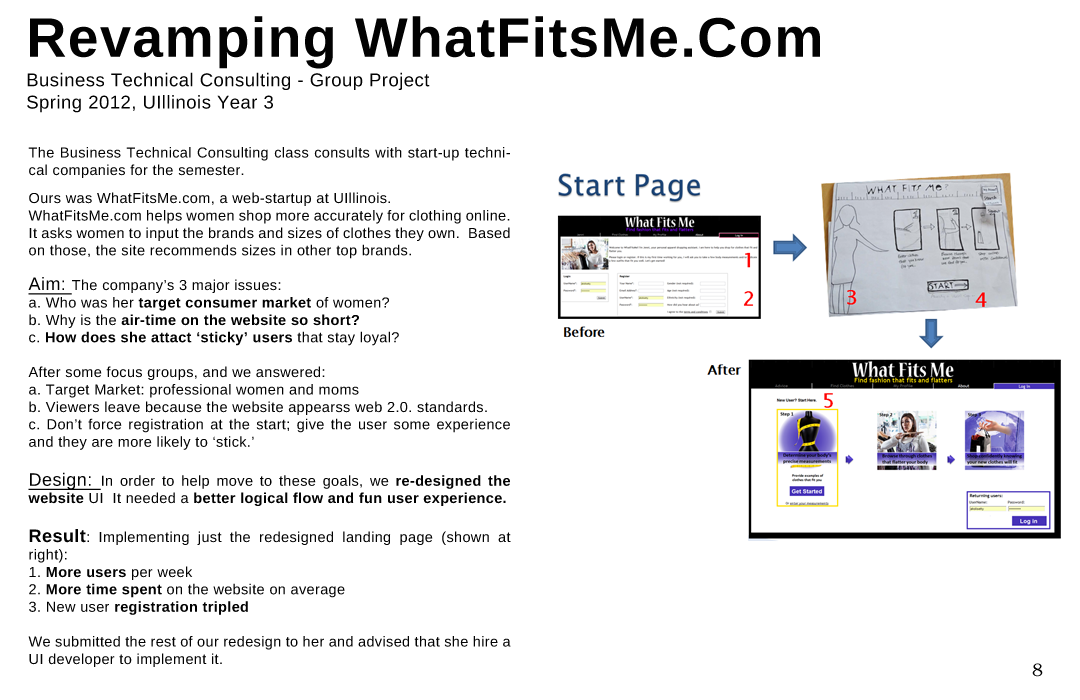
<style>
.page{position:relative;width:1080px;height:700px;background:#ffffff}
.page>*{position:absolute;margin:0}
.t1{font:18.5px "LiberationSans";letter-spacing:0.025em;color:#020202}
.t2{font:55.6px "LiberationSans-Bold";letter-spacing:0.025em;color:#020202}
.t3{font:14.5px "LiberationSans";letter-spacing:0.025em;color:#020202}
.t4{font:18px "LiberationSans";letter-spacing:0.025em;color:#020202;text-decoration:underline}
.t5{font:14.5px "LiberationSans-Bold";letter-spacing:0.025em;color:#020202}
.t6{font:18px "LiberationSans-Bold";letter-spacing:0.025em;color:#020202}
.t7{font:18px "BookmanOldStyle";letter-spacing:0.025em;color:#020202}
</style>
<div class="page">
<p class="t1" style="left:27px;top:16px;width:793px;height:97px;text-align:justify"><span class="t2">Revamping WhatFitsMe.Com<br><br></span>Business Technical Consulting - Group Project<br>Spring 2012, UIllinois Year 3</p>
<p class="t3" style="left:28px;top:147px;width:483px;height:520px;text-align:justify">The Business Technical Consulting class consults with start-up technical companies for the semester.<br><br>Ours was WhatFitsMe.com, a web-startup at UIllinois.<br>WhatFitsMe.com helps women shop more accurately for clothing online.  It asks women to input the brands and sizes of clothes they own.  Based on those, the site recommends sizes in other top brands.<br><br><span class="t4">Aim: </span>The company’s 3 major issues:<br>a. Who was her <span class="t5">target consumer market</span> of women?<br>b. Why is the <span class="t5">air-time on the website so short?</span> <br>c. <span class="t5">How does she attact ‘sticky’ users</span> that stay loyal?<br><br>After some focus groups, and we answered:<br>a. Target Market: professional women and moms<br>b. Viewers leave because the website appearss web 2.0. standards.<br>c. Don’t force registration at the start; give the user some experience and they are more likely to ‘stick.’<br><br><span class="t4">Design: </span>In order to help move to these goals, we <span class="t5">re-designed the website</span> UI  It needed a <span class="t5">better logical flow and fun user experience. <br><br></span><span class="t6">Result</span>: Implementing just the redesigned landing page (shown at right): <br>1. <span class="t5">More users</span> per week<br>2. <span class="t5">More time spent</span> on the website on average<br>3. New user <span class="t5">registration tripled<br></span><br>We submitted the rest of our redesign to her and advised that she hire a UI developer to implement it.</p>
<p class="t7" style="left:1032px;top:663px;width:11px;height:14px">8</p>
</div>
